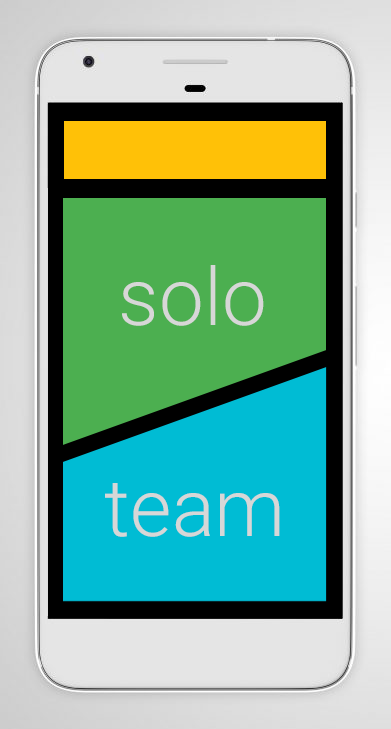
<style>
.page{position:relative;width:391px;height:729px}
.page>*{position:absolute;margin:0}
.t1{font:80px "Roboto-Light";color:#d7d7d7}
</style>
<div class="page">
<p class="t1" style="left:122px;top:265px;width:142px;height:61px">solo</p>
<p class="t1" style="left:105px;top:483px;width:175px;height:54px">team</p>
</div>
